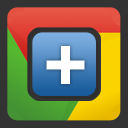
<style>
.page{position:relative;width:128px;height:128px;background:#333333}
.page>*{position:absolute;margin:0}
.t1{font:72px "Helvetica-Bold";color:#ffffff}
</style>
<div class="page">
<p class="t1" style="left:46px;top:46px;width:39px;height:38px">+</p>
</div>
